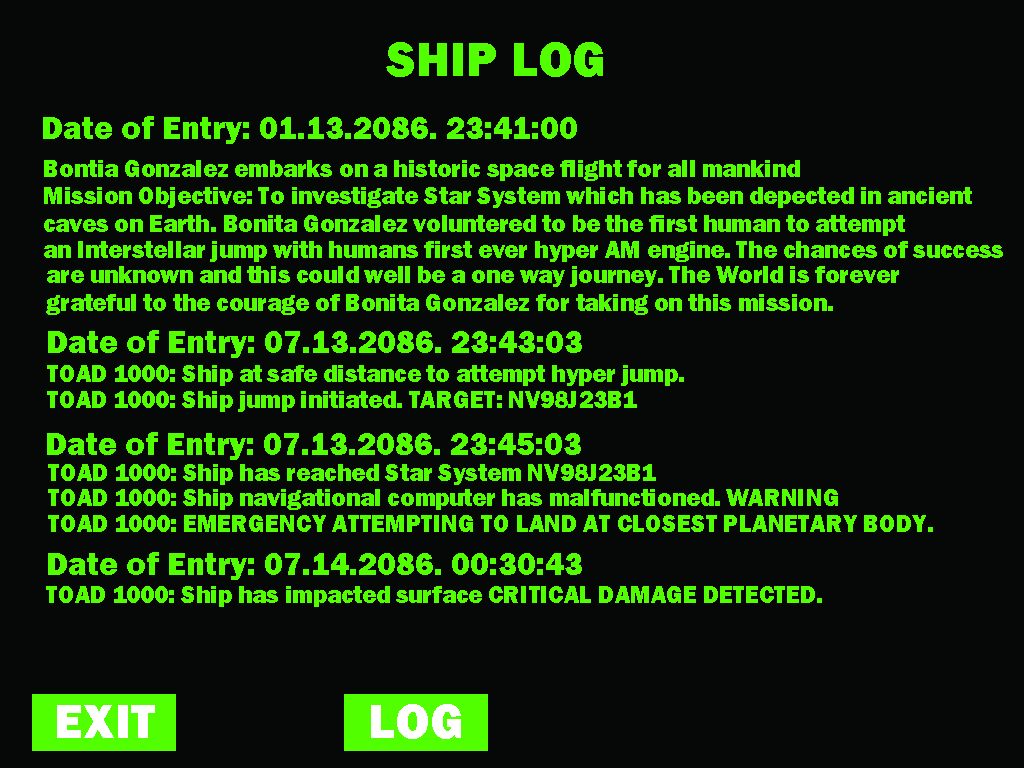
<style>
.page{position:relative;width:1024px;height:768px;background:#060808}
.page>*{position:absolute;margin:0}
.t1{font:50px "FranklinGothic-Heavy";color:#52ff00}
.t2{font:33.3px "FranklinGothic-Heavy";color:#52ff00}
.t3{font:24.5px "FranklinGothic-Heavy";color:#52ff00}
.t4{font:50px "FranklinGothic-Heavy";color:#ffffff}
</style>
<div class="page">
<p class="t1" style="left:386px;top:42px;width:217px;height:35px">SHIP LOG</p>
<p class="t2" style="left:43px;top:116px;width:534px;height:28px">Date of Entry: 01.13.2086. 23:41:00</p>
<p class="t3" style="left:44px;top:160px;width:756px;height:21px">Bontia Gonzalez embarks on a historic space flight for all mankind</p>
<p class="t3" style="left:44px;top:187px;width:928px;height:21px">Mission Objective: To investigate Star System which has been depected in ancient</p>
<p class="t3" style="left:44px;top:215px;width:861px;height:21px">caves on Earth. Bonita Gonzalez voluntered to be the first human to attempt</p>
<p class="t3" style="left:44px;top:241px;width:959px;height:21px">an Interstellar jump with humans first ever hyper AM engine. The chances of success</p>
<p class="t3" style="left:47px;top:266px;width:852px;height:21px">are unknown and this could well be a one way journey. The World is forever</p>
<p class="t3" style="left:46px;top:294px;width:787px;height:21px">grateful to the courage of Bonita Gonzalez for taking on this mission.</p>
<p class="t2" style="left:48px;top:330px;width:534px;height:28px">Date of Entry: 07.13.2086. 23:43:03</p>
<p class="t3" style="left:47px;top:365px;width:637px;height:21px">TOAD 1000: Ship at safe distance to attempt hyper jump.</p>
<p class="t3" style="left:47px;top:391px;width:590px;height:21px">TOAD 1000: Ship jump initiated. TARGET: NV98J23B1</p>
<p class="t2" style="left:47px;top:432px;width:534px;height:28px">Date of Entry: 07.13.2086. 23:45:03</p>
<p class="t3" style="left:48px;top:464px;width:608px;height:21px">TOAD 1000: Ship has reached Star System NV98J23B1</p>
<p class="t3" style="left:48px;top:489px;width:790px;height:21px">TOAD 1000: Ship navigational computer has malfunctioned. WARNING</p>
<p class="t3" style="left:48px;top:515px;width:885px;height:17px">TOAD 1000: EMERGENCY ATTEMPTING TO LAND AT CLOSEST PLANETARY BODY.</p>
<p class="t2" style="left:48px;top:552px;width:534px;height:28px">Date of Entry: 07.14.2086. 00:30:43</p>
<p class="t3" style="left:46px;top:586px;width:776px;height:21px">TOAD 1000: Ship has impacted surface CRITICAL DAMAGE DETECTED.</p>
<p class="t4" style="left:57px;top:705px;width:98px;height:33px">EXIT</p>
<p class="t4" style="left:371px;top:704px;width:90px;height:35px">LOG</p>
</div>
